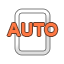
<style>
.page{position:relative;width:64px;height:64px;background:#ffffff}
.page>*{position:absolute;margin:0}
.t1{font:18px "Arial-BoldMT";color:#ff7843}
</style>
<div class="page">
<p class="t1" style="left:7px;top:23px;width:51px;height:13px">AUTO</p>
</div>
